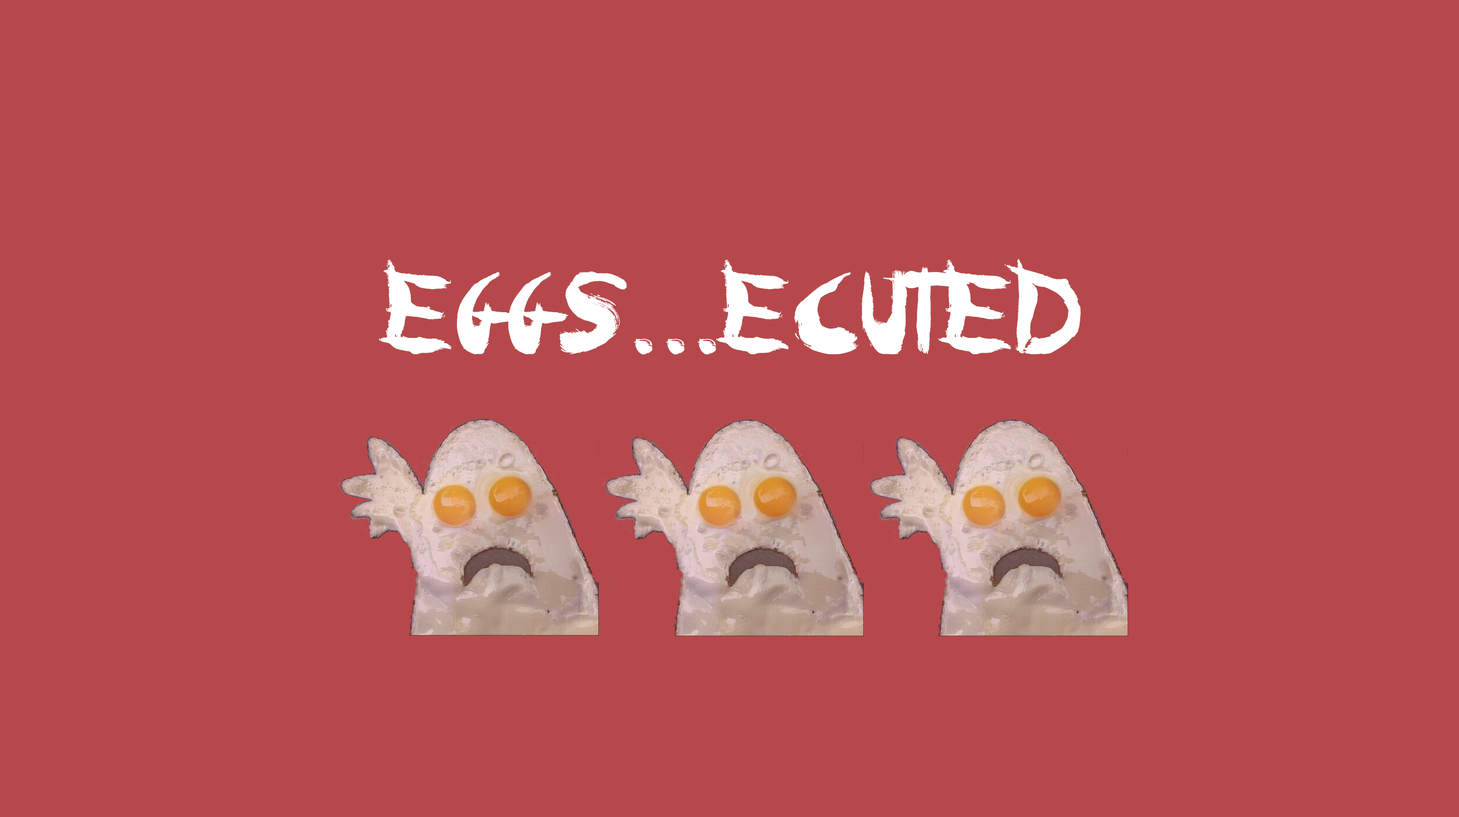
<style>
.page{position:relative;width:1459px;height:817px;background:#b6484b}
.page>*{position:absolute;margin:0}
.t1{font:116.7px "Paranoia";color:#ffffff}
</style>
<div class="page">
<p class="t1" style="left:379px;top:259px;width:702px;height:96px">Eggs...ecuted</p>
</div>
